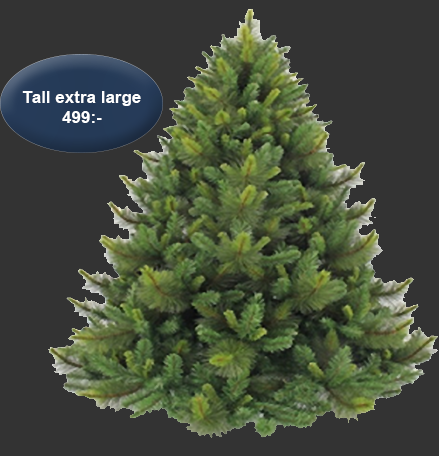
<style>
.page{position:relative;width:439px;height:456px;background:#333333}
.page>*{position:absolute;margin:0}
.t1{font:17px "Arial-BoldMT";color:#ffffff}
</style>
<div class="page">
<p class="t1" style="left:22px;top:91px;width:119px;height:32px;text-align:center">Tall extra large <br>499:-</p>
</div>
